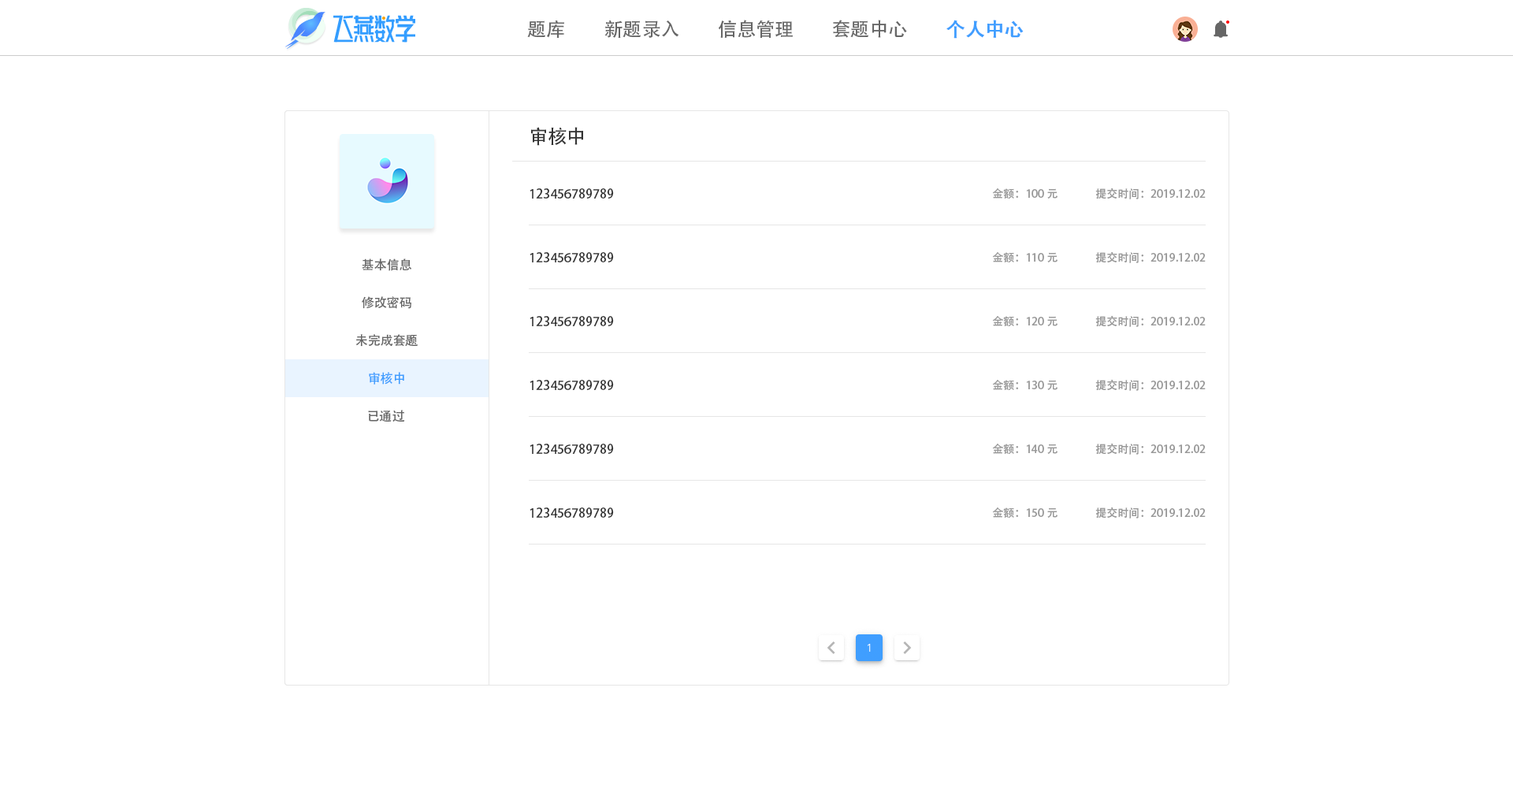
<style>
.page{position:relative;width:1513px;height:788px;background:#ffffff}
.page>*{position:absolute;margin:0}
.t1{font:18.9px "AdobeHeitiStd-Regular";color:#666666}
.t2{font:18.9px "AdobeHeitiStd-Regular";color:#409eff;font-weight:bold}
.t3{font:18.9px "AdobeHeitiStd-Regular";color:#333333}
.t4{font:12.6px "AdobeHeitiStd-Regular";color:#333333}
.t5{font:11px "AdobeHeitiStd-Regular";color:#999999}
.t6{font:12.6px "AdobeHeitiStd-Regular";color:#666666}
.t7{font:12.6px "AdobeHeitiStd-Regular";color:#409eff}
</style>
<div class="page">
<p class="t1" style="left:527px;top:20px;width:37px;height:18px">题库</p>
<p class="t1" style="left:604px;top:20px;width:75px;height:18px">新题录入</p>
<p class="t1" style="left:718px;top:20px;width:75px;height:19px">信息管理</p>
<p class="t1" style="left:833px;top:20px;width:74px;height:18px">套题中心</p>
<p class="t2" style="left:946px;top:20px;width:78px;height:19px">个人中心</p>
<p class="t3" style="left:531px;top:127px;width:52px;height:19px">审核中</p>
<p class="t4" style="left:530px;top:188px;width:84px;height:11px">123456789789</p>
<p class="t5" style="left:992px;top:188px;width:66px;height:11px">金额：100元</p>
<p class="t5" style="left:1095px;top:188px;width:111px;height:11px">提交时间：2019.12.02</p>
<p class="t4" style="left:530px;top:252px;width:84px;height:10px">123456789789</p>
<p class="t5" style="left:992px;top:252px;width:66px;height:10px">金额：110元</p>
<p class="t5" style="left:1095px;top:251px;width:111px;height:12px">提交时间：2019.12.02</p>
<p class="t6" style="left:362px;top:258px;width:50px;height:13px">基本信息</p>
<p class="t6" style="left:362px;top:296px;width:49px;height:13px">修改密码</p>
<p class="t4" style="left:530px;top:316px;width:84px;height:10px">123456789789</p>
<p class="t5" style="left:992px;top:316px;width:66px;height:10px">金额：120元</p>
<p class="t5" style="left:1095px;top:315px;width:111px;height:12px">提交时间：2019.12.02</p>
<p class="t6" style="left:355px;top:334px;width:63px;height:13px">未完成套题</p>
<p class="t7" style="left:369px;top:372px;width:35px;height:13px">审核中</p>
<p class="t4" style="left:530px;top:380px;width:84px;height:10px">123456789789</p>
<p class="t5" style="left:992px;top:380px;width:66px;height:10px">金额：130元</p>
<p class="t5" style="left:1095px;top:379px;width:111px;height:12px">提交时间：2019.12.02</p>
<p class="t6" style="left:368px;top:410px;width:37px;height:12px">已通过</p>
<p class="t4" style="left:530px;top:444px;width:84px;height:10px">123456789789</p>
<p class="t5" style="left:992px;top:444px;width:66px;height:10px">金额：140元</p>
<p class="t5" style="left:1095px;top:443px;width:111px;height:12px">提交时间：2019.12.02</p>
<p class="t4" style="left:530px;top:508px;width:84px;height:10px">123456789789</p>
<p class="t5" style="left:992px;top:508px;width:66px;height:10px">金额：150元</p>
<p class="t5" style="left:1095px;top:507px;width:111px;height:12px">提交时间：2019.12.02</p>
</div>
